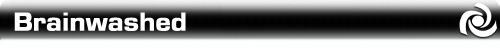
<style>
.page{position:relative;width:500px;height:50px}
.page>*{position:absolute;margin:0}
.t1{font:27px "Eurostile-Hea";letter-spacing:-0.02em;color:#ffffff;font-weight:bold;scale:1.11 1}
</style>
<div class="page">
<p class="t1" style="left:14px;top:12px;width:172px;height:19px">Brainwashed</p>
</div>
